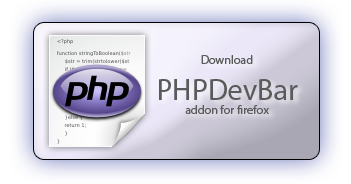
<style>
.page{position:relative;width:351px;height:184px}
.page>*{position:absolute;margin:0}
.t1{font:12px "MyriadPro-Regular";color:#5a5a5a}
.t2{font:30px "MyriadPro-Regular";color:#5a5a5a}
</style>
<div class="page">
<p class="t1" style="left:159px;top:55px;width:139px;height:59px;text-align:center">Download<br><span class="t2">PHPDevBar<br></span>addon for firefox</p>
</div>
